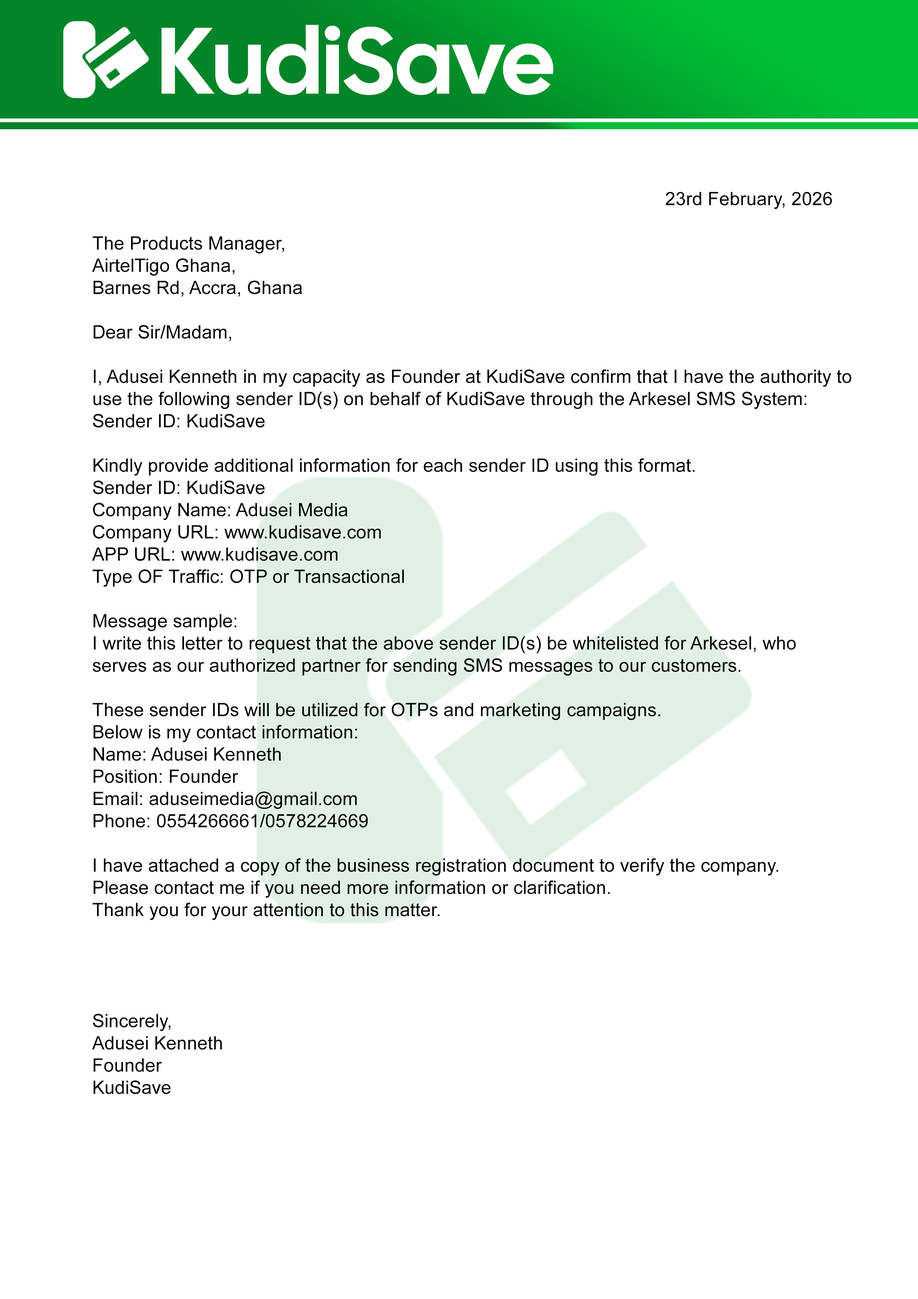
<style>
.page{position:relative;width:918px;height:1299px;background:#ffffff}
.page>*{position:absolute;margin:0}
.t1{font:94.1px "CalSans-SemiBold";color:#ffffff}
.t2{font:18.5px "ArialMT";color:#000000}
</style>
<div class="page">
<p class="t1" style="left:161px;top:25px;width:392px;height:70px">KudiSave</p>
<p class="t2" style="left:92px;top:192px;width:760px;height:902px">23rd February, 2026<br><br>The Products Manager,<br>AirtelTigo Ghana,<br>Barnes Rd, Accra, Ghana<br><br>Dear Sir/Madam,<br><br>I, Adusei Kenneth in my capacity as Founder at KudiSave confirm that I have the authority to use the following sender ID(s) on behalf of KudiSave through the Arkesel SMS System:<br>Sender ID: KudiSave<br><br>Kindly provide additional information for each sender ID using this format.<br>Sender ID: KudiSave<br>Company Name: Adusei Media<br>Company URL: www.kudisave.com<br>APP URL: www.kudisave.com<br>Type OF Traffic: OTP or Transactional<br><br>Message sample:<br>I write this letter to request that the above sender ID(s) be whitelisted for Arkesel, who serves as our authorized partner for sending SMS messages to our customers.<br><br>These sender IDs will be utilized for OTPs and marketing campaigns.<br>Below is my contact information:<br>Name: Adusei Kenneth<br>Position: Founder<br>Email: aduseimedia@gmail.com<br>Phone: 0554266661/0578224669<br><br>I have attached a copy of the business registration document to verify the company.     Please contact me if you need more information or clarification. <br>Thank you for your attention to this matter.<br><br><br><br><br>Sincerely,<br>Adusei Kenneth<br>Founder<br>KudiSave</p>
</div>
